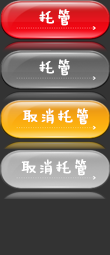
<style>
.page{position:relative;width:110px;height:255px;background:#333333}
.page>*{position:absolute;margin:0}
.t1{font:16.5px "FZMWJW--GB1-0";color:#ffffff;font-weight:bold}
</style>
<div class="page">
<p class="t1" style="left:39px;top:9px;width:31px;height:17px">托管</p>
<p class="t1" style="left:39px;top:59px;width:31px;height:17px">托管</p>
<p class="t1" style="left:23px;top:108px;width:65px;height:17px">取消托管</p>
<p class="t1" style="left:21px;top:159px;width:66px;height:17px">取消托管</p>
</div>
